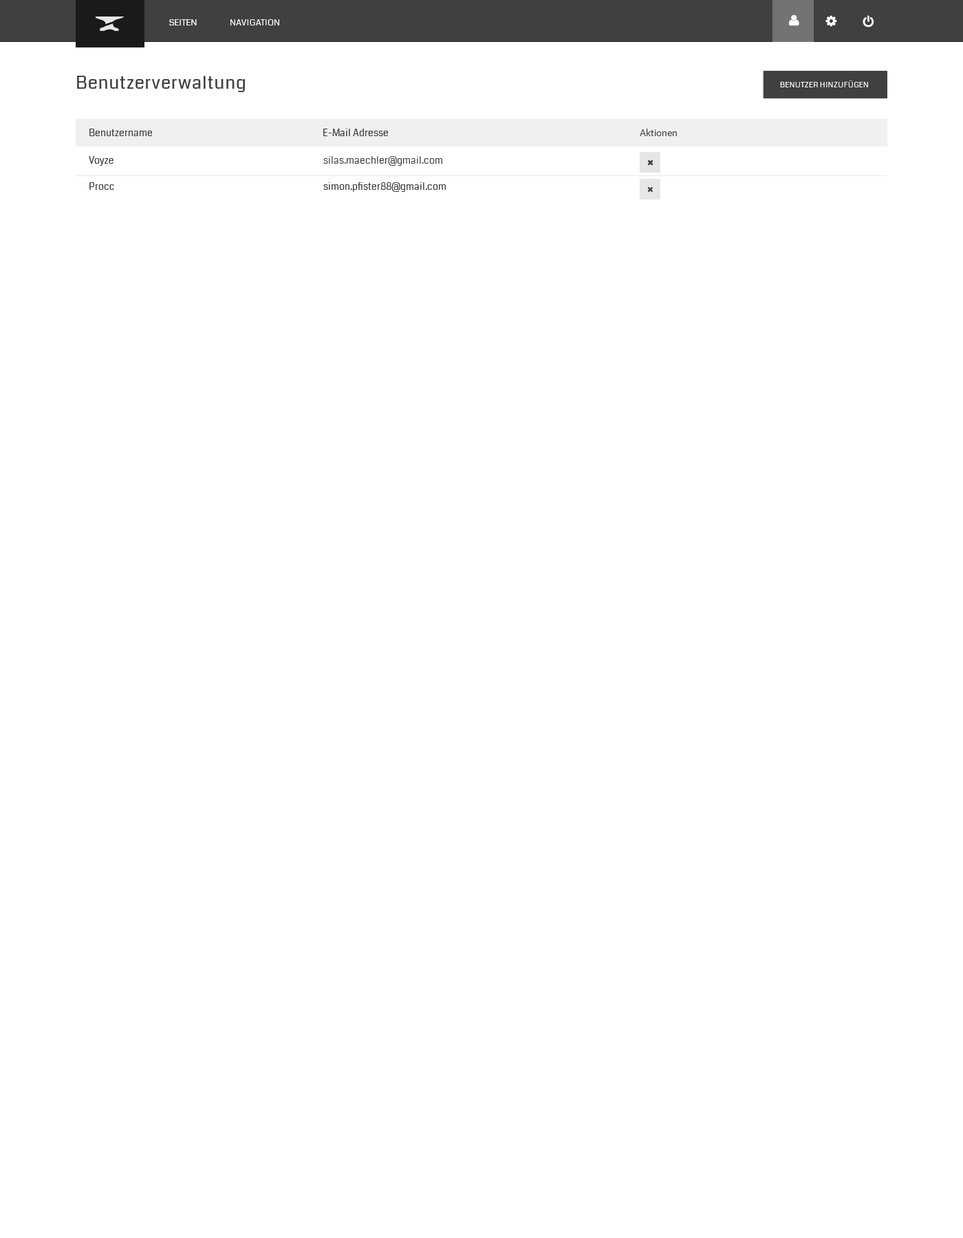
<style>
.page{position:relative;width:963px;height:1238px;background:#ffffff}
.page>*{position:absolute;margin:0}
.t1{font:8.9px "Coda-Regular";color:#ffffff;text-transform:uppercase}
.t2{font:17.9px "Coda-Regular";letter-spacing:0.03em;color:#404040}
.t3{font:7.6px "Coda-Regular";letter-spacing:0.03em;color:#ffffff;text-transform:uppercase}
.t4{font:9.6px "Coda-Regular";color:#404040}
.t5{font:9.6px "Roboto-Regular";color:#404040}
</style>
<div class="page">
<p class="t1" style="left:169px;top:19px;width:28px;height:6px">Seiten</p>
<p class="t1" style="left:230px;top:19px;width:49px;height:6px">Navigation</p>
<p class="t2" style="left:77px;top:76px;width:168px;height:16px">Benutzerverwaltung</p>
<p class="t3" style="left:780px;top:80px;width:88px;height:7px">Benutzer hinzufügen</p>
<p class="t4" style="left:89px;top:129px;width:63px;height:7px">Benutzername</p>
<p class="t4" style="left:323px;top:129px;width:65px;height:7px">E-Mail Adresse</p>
<p class="t5" style="left:640px;top:129px;width:37px;height:7px">Aktionen</p>
<p class="t4" style="left:89px;top:156px;width:25px;height:10px">Voyze</p>
<p class="t4" style="left:323px;top:156px;width:119px;height:10px">silas.maechler@gmail.com</p>
<p class="t4" style="left:89px;top:182px;width:25px;height:8px">Procc</p>
<p class="t4" style="left:323px;top:182px;width:123px;height:10px">simon.pfister88@gmail.com</p>
</div>
